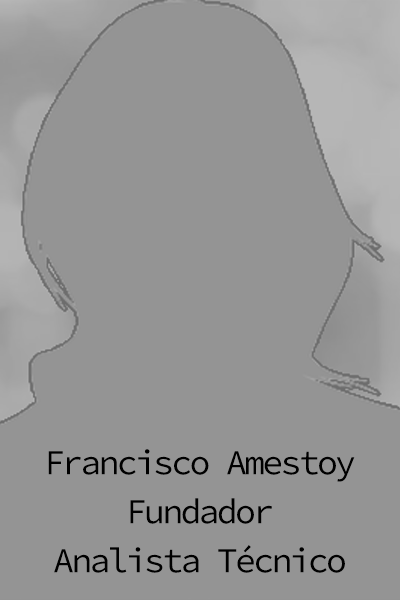
<style>
.page{position:relative;width:400px;height:600px;background:#949494}
.page>*{position:absolute;margin:0}
.t1{font:35px/49px "SourceCodePro-Regular";letter-spacing:-0.08em;color:#000000}
</style>
<div class="page">
<p class="t1" style="left:48px;top:449px;width:307px;height:124px;text-align:center">Francisco Amestoy<br>Fundador<br>Analista Técnico</p>
</div>
